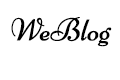
<style>
.page{position:relative;width:120px;height:80px;background:#ffffff}
.page>*{position:absolute;margin:0}
.t1{font:32px "Niconne-Regular";color:#000000}
</style>
<div class="page">
<p class="t1" style="left:11px;top:17px;width:101px;height:30px">WeBlog</p>
</div>
